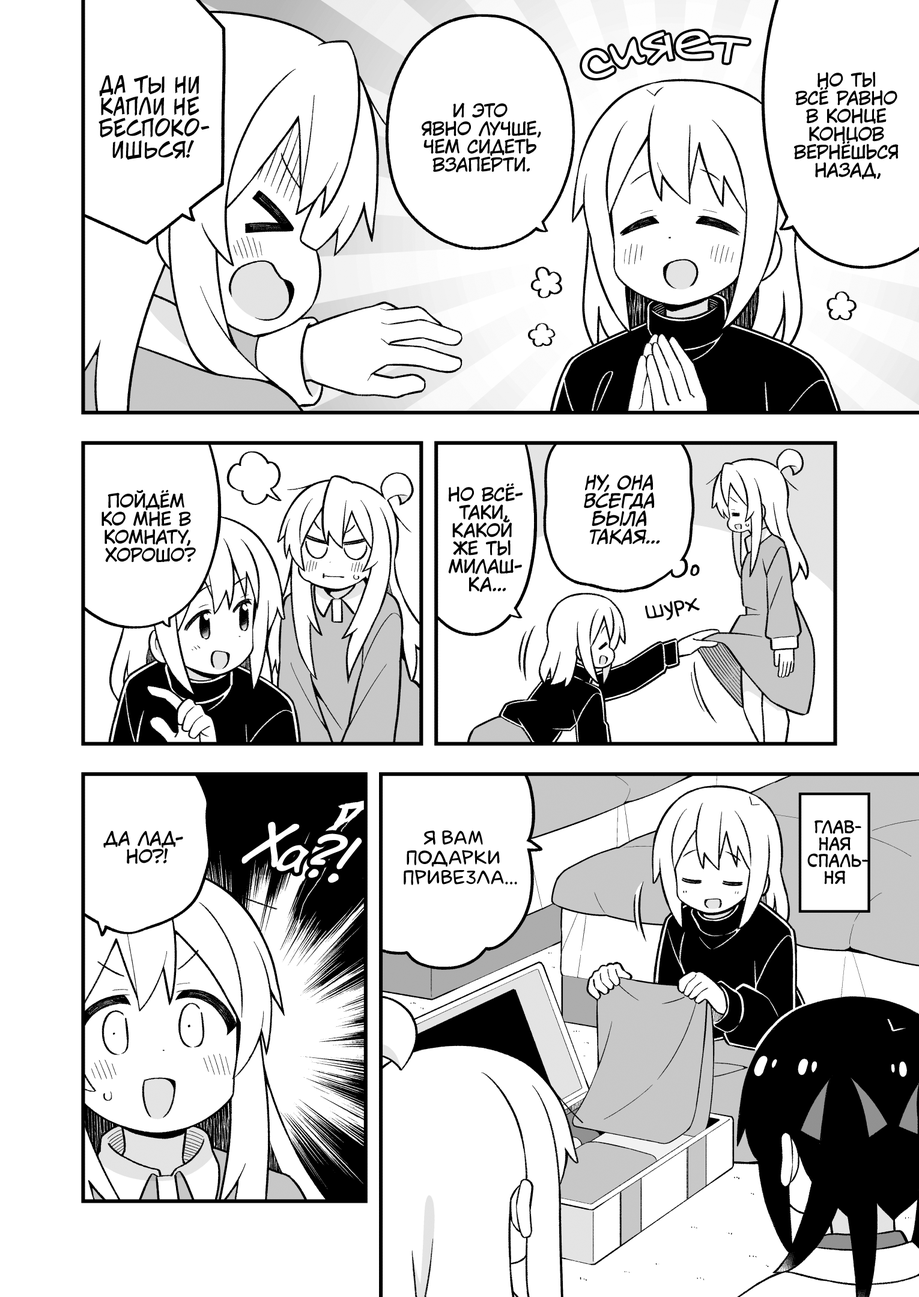
<style>
.page{position:relative;width:919px;height:1297px;background:#ffffff}
.page>*{position:absolute;margin:0}
.t1{font:21.6px "v_CCJeffCampbell";color:#000000;text-transform:uppercase}
.t2{font:18px "KuraiVoice2";color:#000000;text-transform:uppercase}
.t3{font:18px "CCMeanwhile";color:#000000;text-transform:uppercase;font-style:italic}
.t4{font:25.2px "v_Augie";color:#000000}
.t5{font:57.7px "v_CCDearDiary";color:#ffffff}
.t6{font:16.8px "v_CCMonologous";color:#000000;text-transform:uppercase}
.t7{font:19.8px "laCartoonerie";color:#000000;text-transform:uppercase}
</style>
<div class="page">
<p class="t1" style="left:99px;top:75px;width:111px;height:85px;text-align:center">Да ты ни<br>капли не<br>беспоко-<br>ишься!</p>
<p class="t2" style="left:794px;top:71px;width:105px;height:109px;text-align:center">Но ты<br>всё равно<br>в конце<br>концов<br>вернёшься<br>назад,</p>
<p class="t2" style="left:422px;top:103px;width:119px;height:69px;text-align:center">И это<br>явно лучше,<br>чем сидеть<br>взаперти.</p>
<p class="t3" style="left:584px;top:474px;width:76px;height:71px;text-align:center">Ну, она<br>всегда<br>была<br>такая...</p>
<p class="t2" style="left:448px;top:484px;width:75px;height:108px;text-align:center">Но всё-<br>таки,<br>какой<br>же ты<br>милаш-<br>ка...</p>
<p class="t2" style="left:102px;top:490px;width:94px;height:73px;text-align:center">Пойдём<br>ко мне в<br>комнату,<br>хорошо?</p>
<p class="t4" style="left:645px;top:598px;width:55px;height:23px;rotate:-9deg">шурх</p>
<p class="t5" style="left:241px;top:822px;width:121px;height:61px;rotate:14deg">Ха?!</p>
<p class="t6" style="left:807px;top:821px;width:62px;height:64px;text-align:center">Глав-<br>ная<br>спаль-<br>ня</p>
<p class="t2" style="left:103px;top:831px;width:80px;height:33px;text-align:center">Да лад-<br>но?!</p>
<p class="t7" style="left:404px;top:831px;width:113px;height:54px;text-align:center">Я вам<br>подарки<br>привезла...</p>
</div>
